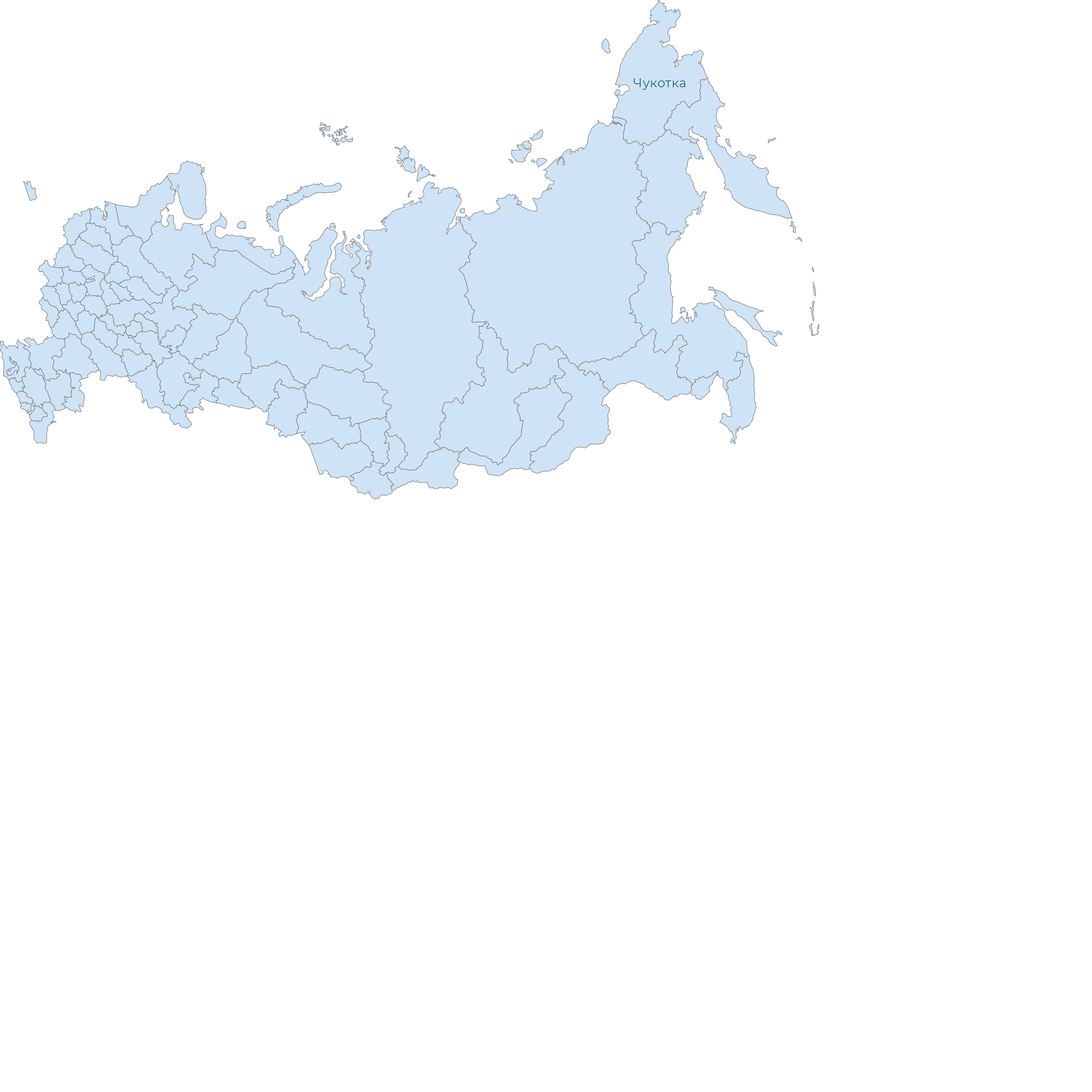
<style>
.page{position:relative;width:1092px;height:1092px;background:#ffffff}
.page>*{position:absolute;margin:0}
.t1{font:12.5px "Montserrat-Regular";letter-spacing:0.03em;color:#25588b}
</style>
<div class="page">
<p class="t1" style="left:634px;top:78px;width:51px;height:12px">Чукотка</p>
</div>
